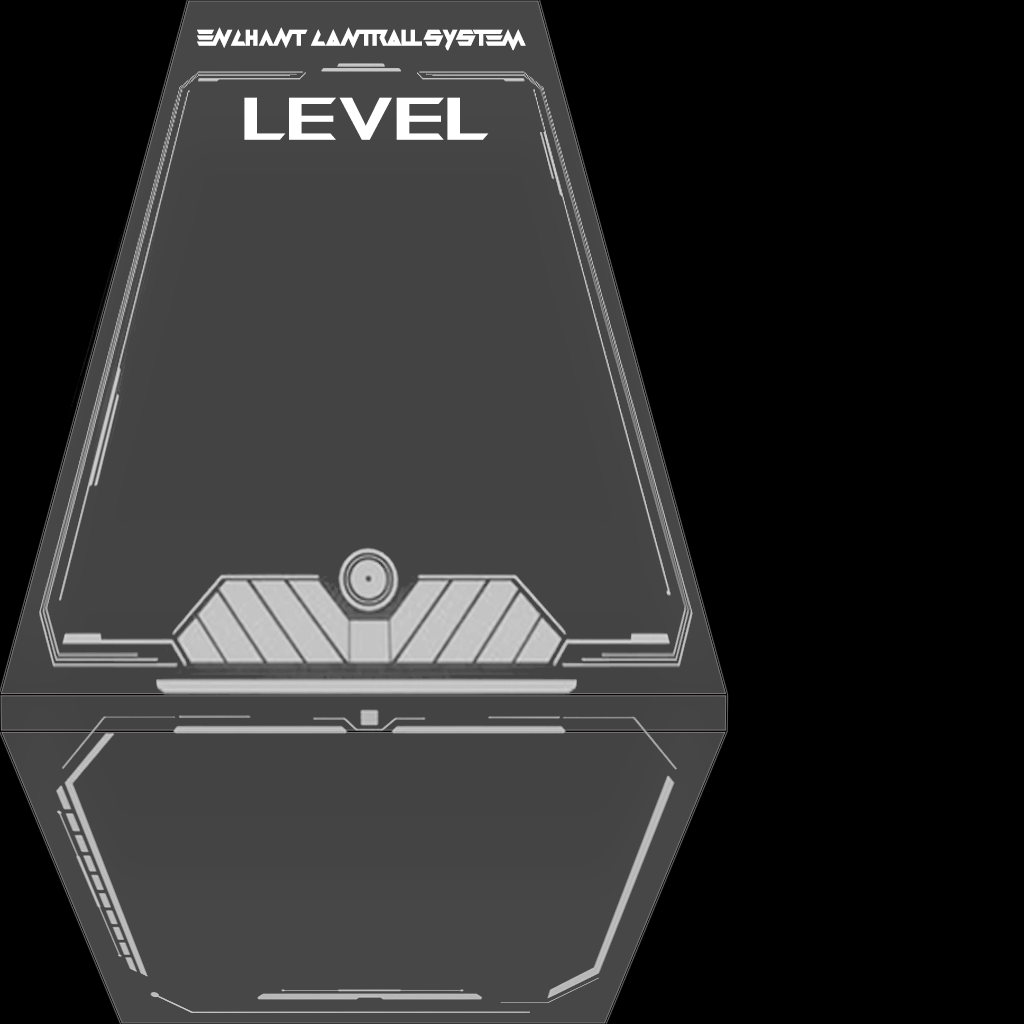
<style>
.page{position:relative;width:1024px;height:1024px;background:#000000}
.page>*{position:absolute;margin:0}
.t1{font:22px "Masterblast";color:#ffffff}
.t2{font:60px "AniMeMatrix-MB_EN";color:#ffffff}
</style>
<div class="page">
<p class="t1" style="left:197px;top:27px;width:329px;height:24px">Enchant Controll System</p>
<p class="t2" style="left:244px;top:97px;width:245px;height:43px">LEVEL</p>
</div>
